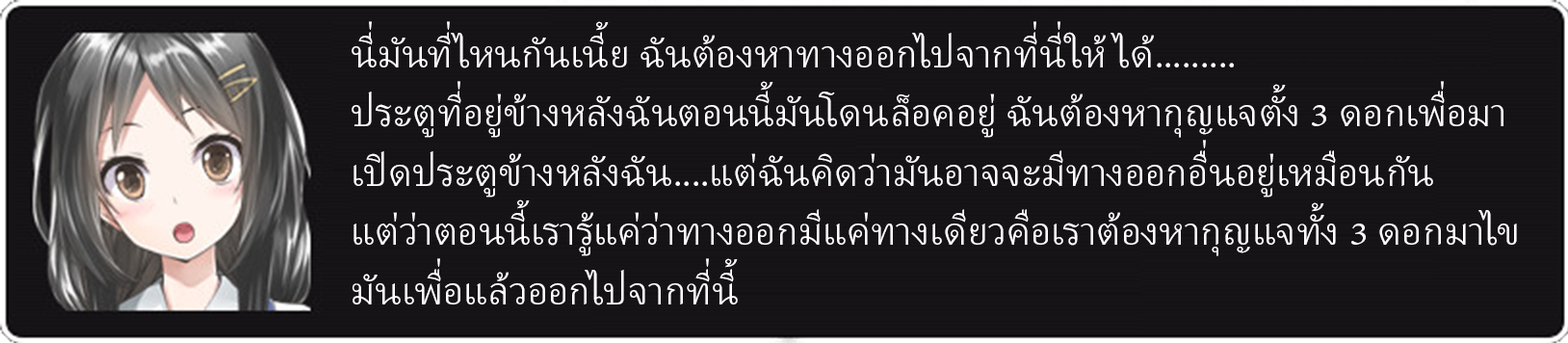
<style>
.page{position:relative;width:1568px;height:343px;background:#151316}
.page>*{position:absolute;margin:0}
.t1{font:49.4px "AdobeThai-Regular";color:#ffffff}
</style>
<div class="page">
<p class="t1" style="left:352px;top:21px;width:1165px;height:284px">นี่มันที่ไหนกันเนี้ย ฉันต้องหาทางออกไปจากที่นี่ให้ได้.........   <br>ประตูที่อยู่ข้างหลังฉันตอนนี้มันโดนล็อคอยู่ ฉันต้องหากุญแจตั้ง 3 ดอกเพื่อมาเปิดประตูข้างหลังฉัน....แต่ฉันคิดว่ามันอาจจะมีทางออกอื่นอยู่เหมือนกัน      แต่ว่าตอนนี้เรารู้แค่ว่าทางออกมีแค่ทางเดียวคือเราต้องหากุญแจทั้ง 3 ดอกมาไขมันเพื่อแล้วออกไปจากที่นี้</p>
</div>
